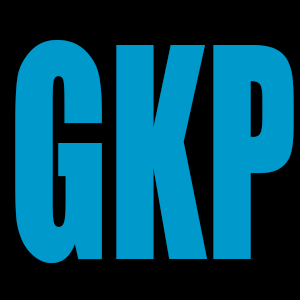
<style>
.page{position:relative;width:300px;height:300px;background:#000000}
.page>*{position:absolute;margin:0}
.t1{font:270.8px "Impact";color:#0099cc;scale:0.67 1}
</style>
<div class="page">
<p class="t1" style="left:15px;top:40px;width:279px;height:223px">GKP</p>
</div>
